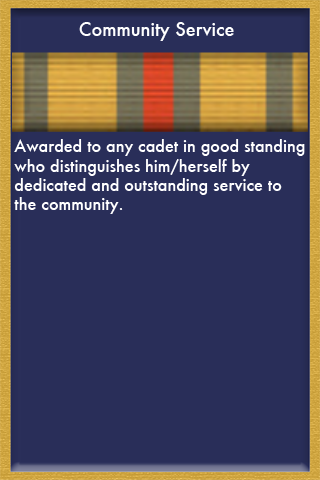
<style>
.page{position:relative;width:320px;height:480px;background:#292e59}
.page>*{position:absolute;margin:0}
.t1{font:18px "Futura-Medium";color:#ffffff}
.t2{font:16px "Futura-Medium";color:#ffffff}
</style>
<div class="page">
<p class="t1" style="left:79px;top:22px;width:155px;height:19px">Community Service</p>
<p class="t2" style="left:14px;top:139px;width:291px;height:75px">Awarded to any cadet in good standing <br>who distinguishes him/herself by <br>dedicated and outstanding service to <br>the community.</p>
</div>
